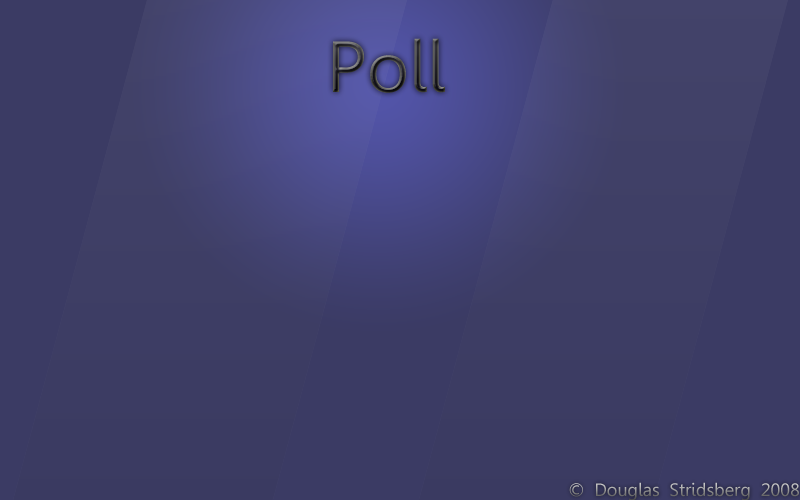
<style>
.page{position:relative;width:800px;height:500px;background:#3b3b64}
.page>*{position:absolute;margin:0}
.t1{font:72px "Leelawadee"}
.t2{font:18px "Leelawadee"}
</style>
<div class="page">
<p class="t1" style="left:333px;top:38px;width:112px;height:55px">Poll</p>
<p class="t2" style="left:569px;top:482px;width:230px;height:19px">© Douglas Stridsberg 2008</p>
</div>
